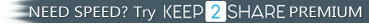
<style>
.page{position:relative;width:369px;height:25px;background:#455a64}
.page>*{position:absolute;margin:0}
.t1{font:15px "MicrosoftTaiLe";color:#ffffff;scale:1.12 1}
</style>
<div class="page">
<p class="t1" style="left:29px;top:6px;width:333px;height:15px">NEED SPEED? Try                             PREMIUM</p>
</div>
